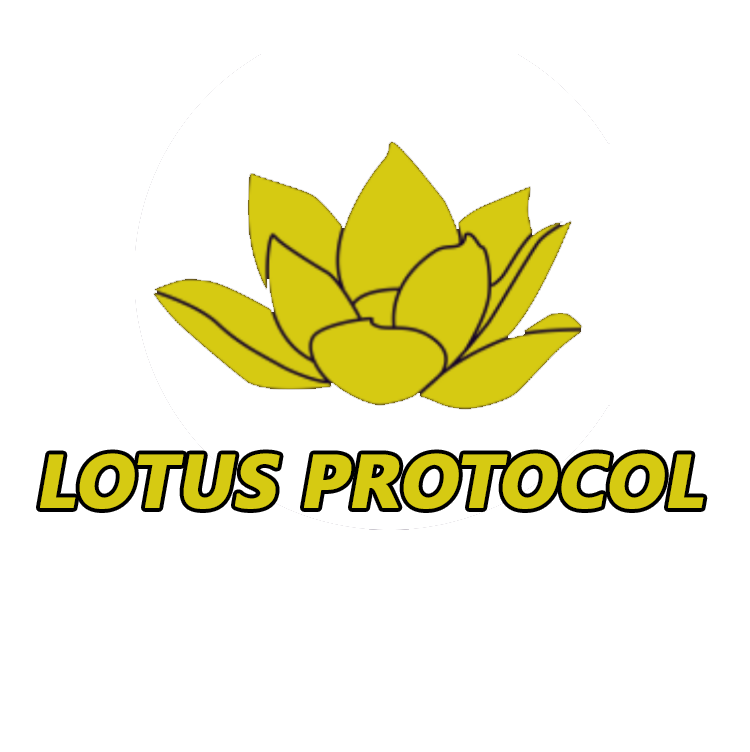
<style>
.page{position:relative;width:750px;height:752px;background:#ffffff}
.page>*{position:absolute;margin:0}
.t1{font:75px "LeelawadeeUI-Bold";color:#d6ca12;font-weight:bold;font-style:italic}
</style>
<div class="page">
<p class="t1" style="left:40px;top:453px;width:664px;height:56px">LOTUS PROTOCOL</p>
</div>
